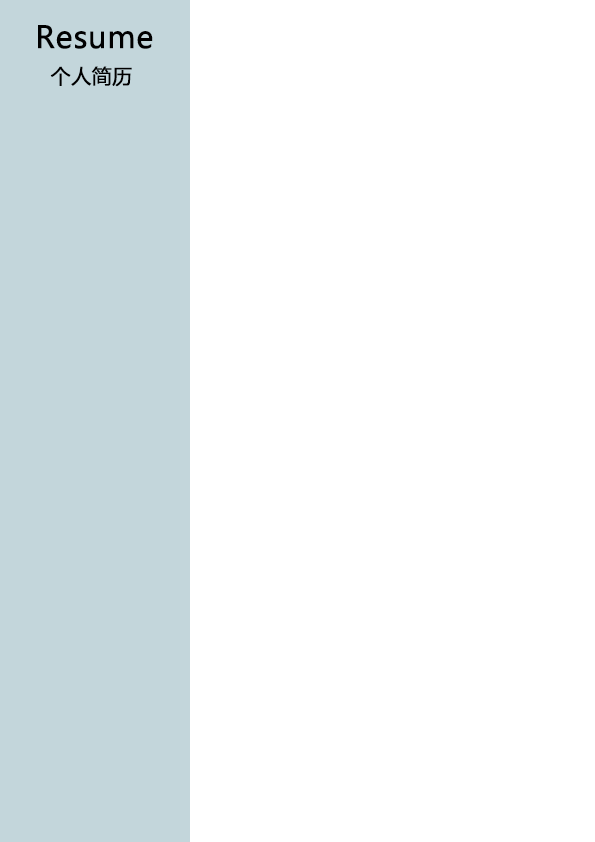
<style>
.page{position:relative;width:595px;height:842px;background:#ffffff}
.page>*{position:absolute;margin:0}
.t1{font:30px "MicrosoftYaHei";color:#000000;font-weight:bold}
.t2{font:20px "MicrosoftYaHei";color:#000000;font-weight:bold}
</style>
<div class="page">
<p class="t1" style="left:38px;top:25px;width:115px;height:24px">Resume</p>
<p class="t2" style="left:50px;top:66px;width:82px;height:21px">个人简历</p>
</div>
